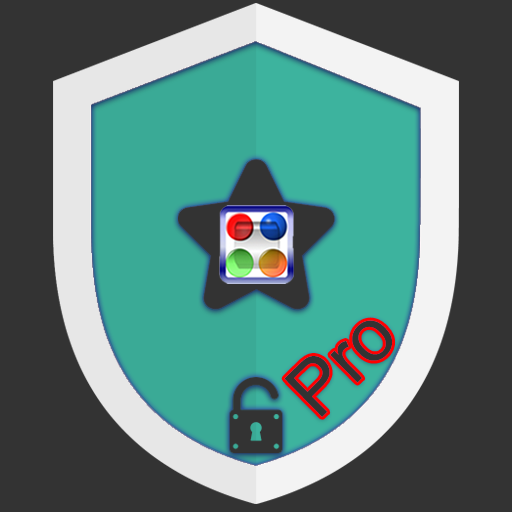
<style>
.page{position:relative;width:512px;height:512px;background:#333333}
.page>*{position:absolute;margin:0}
.t1{font:75px "ArialMT";color:#333333}
</style>
<div class="page">
<p class="t1" style="left:284px;top:320px;width:109px;height:97px;rotate:-45deg">Pro</p>
</div>
